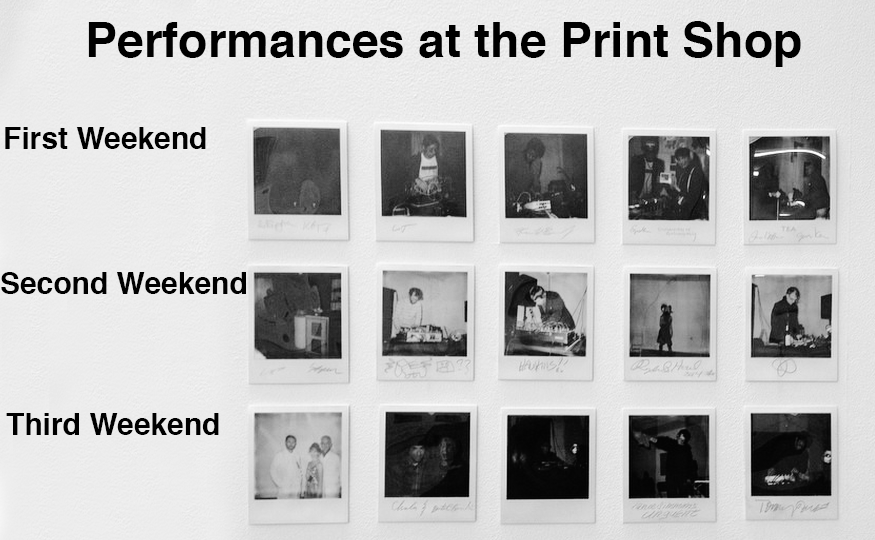
<style>
.page{position:relative;width:875px;height:540px}
.page>*{position:absolute;margin:0}
.t1{font:48px "Helvetica-Bold";color:#000000}
.t2{font:29.9px "Helvetica-Bold";color:#000000}
.t3{font:30px "Helvetica-Bold";color:#000000}
</style>
<div class="page">
<p class="t1" style="left:88px;top:21px;width:713px;height:46px">Performances at the Print Shop</p>
<p class="t2" style="left:5px;top:127px;width:201px;height:22px">First Weekend</p>
<p class="t3" style="left:1px;top:272px;width:245px;height:22px">Second Weekend</p>
<p class="t3" style="left:6px;top:413px;width:213px;height:22px">Third Weekend</p>
</div>
